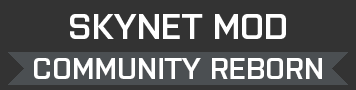
<style>
.page{position:relative;width:356px;height:90px;background:#333333}
.page>*{position:absolute;margin:0}
.t1{font:36px "Purista-SemiBold";color:#ffffff}
.t2{font:30px "Purista-SemiBold";color:#ffffff}
</style>
<div class="page">
<p class="t1" style="left:70px;top:14px;width:216px;height:25px">SKYNET MOD</p>
<p class="t2" style="left:34px;top:58px;width:288px;height:21px">COMMUNITY REBORN</p>
</div>
